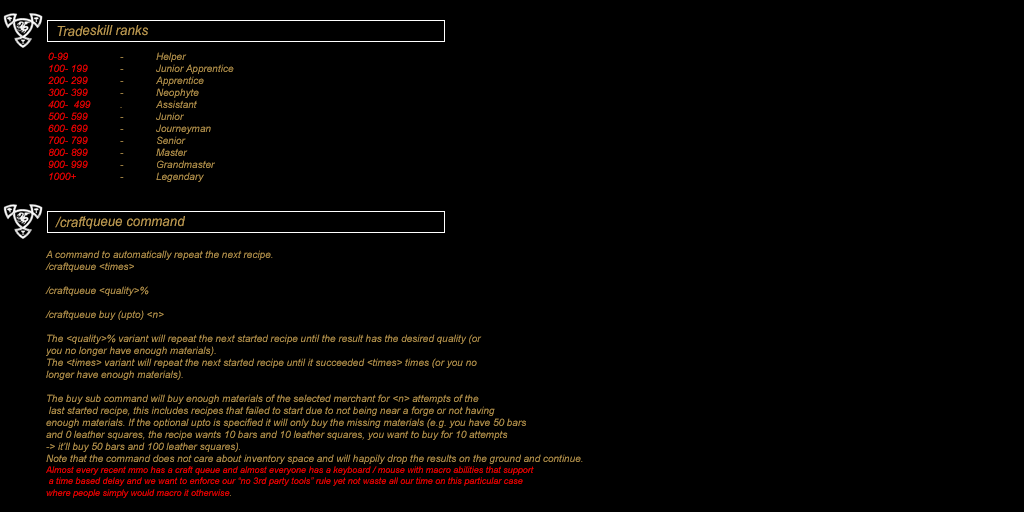
<style>
.page{position:relative;width:1024px;height:512px;background:#000000}
.page>*{position:absolute;margin:0}
.t1{font:14px "Arial-ItalicMT";color:#be9b53;scale:0.95 1}
.t2{font:10px "Arial-ItalicMT";color:#be9b53}
.t3{font:10px "Arial-ItalicMT";color:#ff0000}
.t4{font:9px "Arial-ItalicMT";color:#ff0000}
</style>
<div class="page">
<p class="t1" style="left:57px;top:25px;width:91px;height:12px">Tradeskill ranks</p>
<p class="t2" style="left:48px;top:52px;width:186px;height:130px"><span class="t3">0-99 </span>  - Helper<br><span class="t3">100- 199</span> - Junior Apprentice<br><span class="t3">200- 299</span> - Apprentice<br><span class="t3">300- 399</span> - Neophyte<br><span class="t3">400-  499</span> . Assistant<br><span class="t3">500- 599</span> - Junior<br><span class="t3">600- 699</span> - Journeyman<br><span class="t3">700- 799</span> - Senior<br><span class="t3">800- 899</span> -  Master<br><span class="t3">900- 999</span> - Grandmaster<br><span class="t3">1000+  </span>- Legendary</p>
<p class="t1" style="left:55px;top:216px;width:130px;height:13px">/craftqueue command</p>
<p class="t2" style="left:45px;top:250px;width:538px;height:248px">A command to automatically repeat the next recipe.<br>/craftqueue &lt;times&gt;<br><br>/craftqueue &lt;quality&gt;%<br><br>/craftqueue buy (upto) &lt;n&gt;<br><br>The &lt;quality&gt;% variant will repeat the next started recipe until the result has the desired quality (or <br>you no longer have enough materials).<br>The &lt;times&gt; variant will repeat the next started recipe until it succeeded &lt;times&gt; times (or you no <br>longer have enough materials).<br><br>The buy sub command will buy enough materials of the selected merchant for &lt;n&gt; attempts of the<br> last started recipe, this includes recipes that failed to start due to not being near a forge or not having <br>enough materials. If the optional upto is specified it will only buy the missing materials (e.g. you have 50 bars <br>and 0 leather squares, the recipe wants 10 bars and 10 leather squares, you want to buy for 10 attempts <br>-&gt; it’ll buy 50 bars and 100 leather squares).<br>Note that the command does not care about inventory space and will happily drop the results on the ground and continue.<br><span class="t4">Almost every recent mmo has a craft queue and almost everyone has a keyboard / mouse with macro abilities that support<br> a time based delay and we want to enforce our “no 3rd party tools” rule yet not waste all our time on this particular case <br>where people simply would macro it otherwise</span>.</p>
</div>
